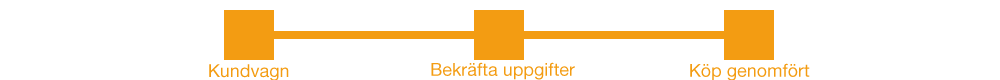
<style>
.page{position:relative;width:1000px;height:80px;background:#ffffff}
.page>*{position:absolute;margin:0}
.t1{font:18px "HelveticaNeueLTPro-Roman";color:#f39c12}
</style>
<div class="page">
<p class="t1" style="left:209px;top:64px;width:80px;height:17px">Kundvagn</p>
<p class="t1" style="left:431px;top:62px;width:144px;height:18px">Bekräfta uppgifter</p>
<p class="t1" style="left:690px;top:63px;width:120px;height:18px">Köp genomfört</p>
</div>
